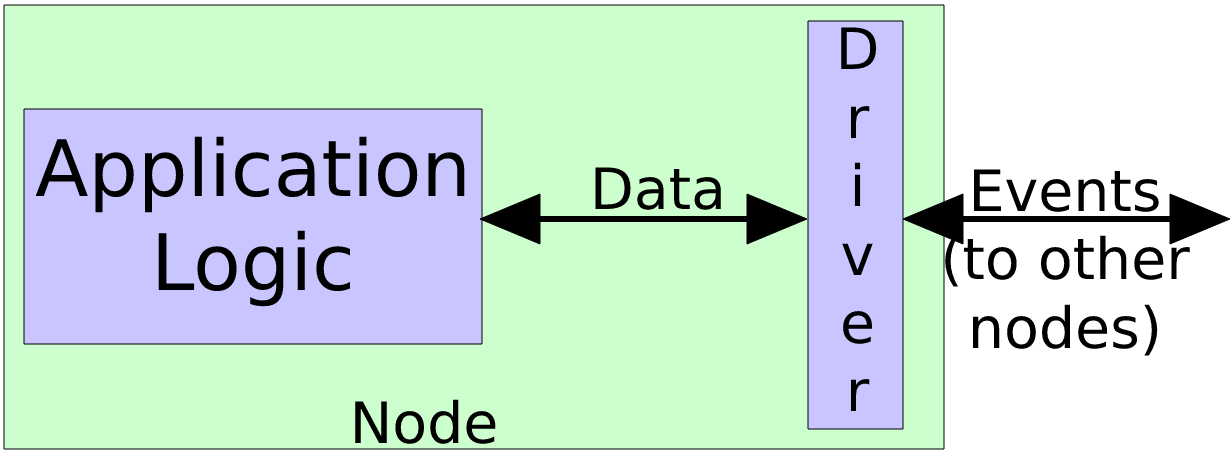
<style>
.page{position:relative;width:1231px;height:453px;background:#cdffce}
.page>*{position:absolute;margin:0}
.t1{font:57px "DejaVuSans";color:#000000}
.t2{font:78px "DejaVuSans";color:#000000}
</style>
<div class="page">
<p class="t1" style="left:841px;top:27px;width:36px;height:384px;text-align:center">D<br>r<br>i<br>v<br>e<br>r</p>
<p class="t2" style="left:35px;top:136px;width:430px;height:171px;text-align:center">Application Logic</p>
<p class="t1" style="left:595px;top:167px;width:126px;height:43px">Data</p>
<p class="t1" style="left:945px;top:169px;width:245px;height:187px;text-align:center">Events<br>(to other<br>nodes)</p>
<p class="t1" style="left:355px;top:399px;width:141px;height:45px">Node</p>
</div>
